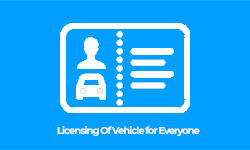
<style>
.page{position:relative;width:250px;height:150px;background:#009fff}
.page>*{position:absolute;margin:0}
.t1{font:9.9px "Montserrat-Bold";letter-spacing:-0.1em;color:#ffffff}
</style>
<div class="page">
<p class="t1" style="left:57px;top:126px;width:143px;height:10px">Licensing Of Vehicle for Everyone</p>
</div>
